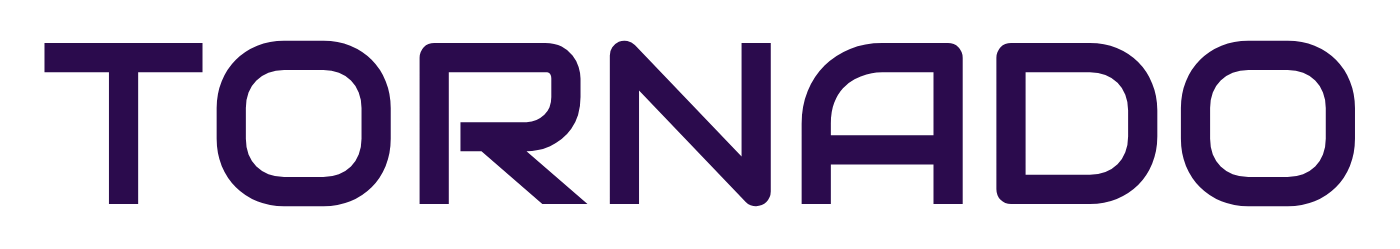
<style>
.page{position:relative;width:1400px;height:249px;background:#ffffff}
.page>*{position:absolute;margin:0}
.t1{font:230px "Audiowide-Regular";color:#2b0b4d}
</style>
<div class="page">
<p class="t1" style="left:44px;top:40px;width:1311px;height:167px">TORNADO</p>
</div>
